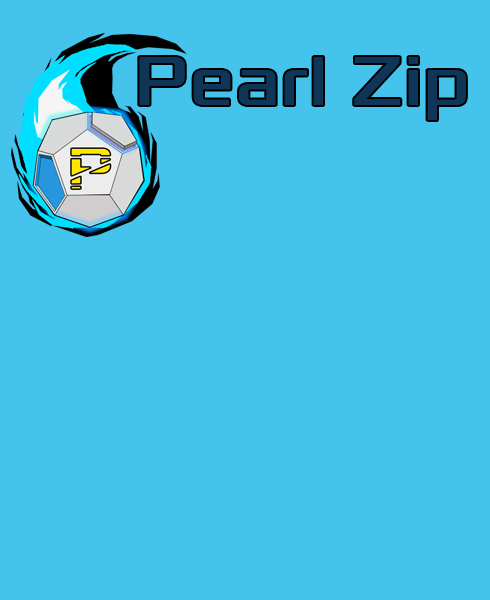
<style>
.page{position:relative;width:490px;height:600px;background:#44c3ec}
.page>*{position:absolute;margin:0}
.t1{font:72px "Xolonium";color:#0e3659}
</style>
<div class="page">
<p class="t1" style="left:139px;top:57px;width:327px;height:63px">Pearl Zip</p>
</div>
